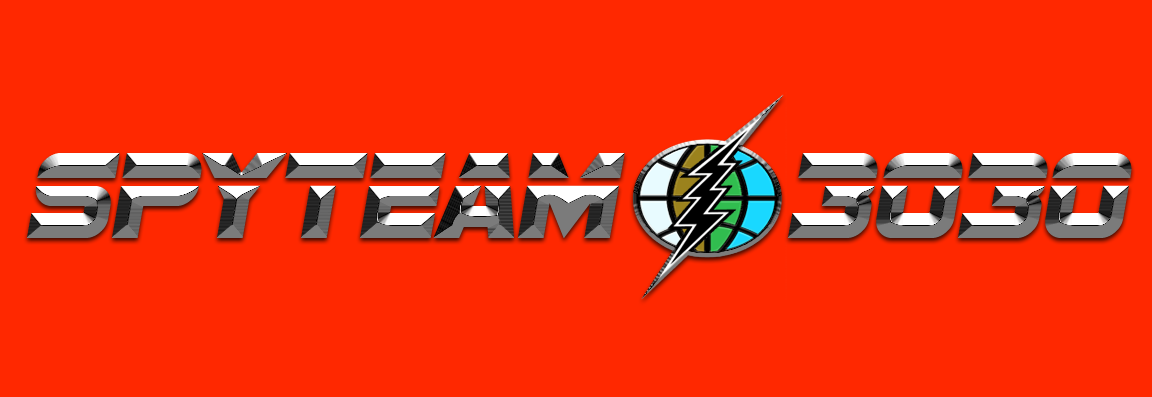
<style>
.page{position:relative;width:1152px;height:397px;background:#ff2800}
.page>*{position:absolute;margin:0}
.t1{font:126.9px "SFSportsNight"}
.t2{font:126.9px "SFSportsNight";letter-spacing:-0.045em}
</style>
<div class="page">
<p class="t1" style="left:27px;top:153px;width:1105px;height:85px">S<span class="t2">p</span>yTeam 3030</p>
</div>
